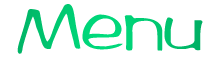
<style>
.page{position:relative;width:224px;height:62px;background:#ffffff}
.page>*{position:absolute;margin:0}
.t1{font:72px "Arctic2";color:#00ca72}
</style>
<div class="page">
<p class="t1" style="left:17px;top:4px;width:186px;height:50px">Menu</p>
</div>
